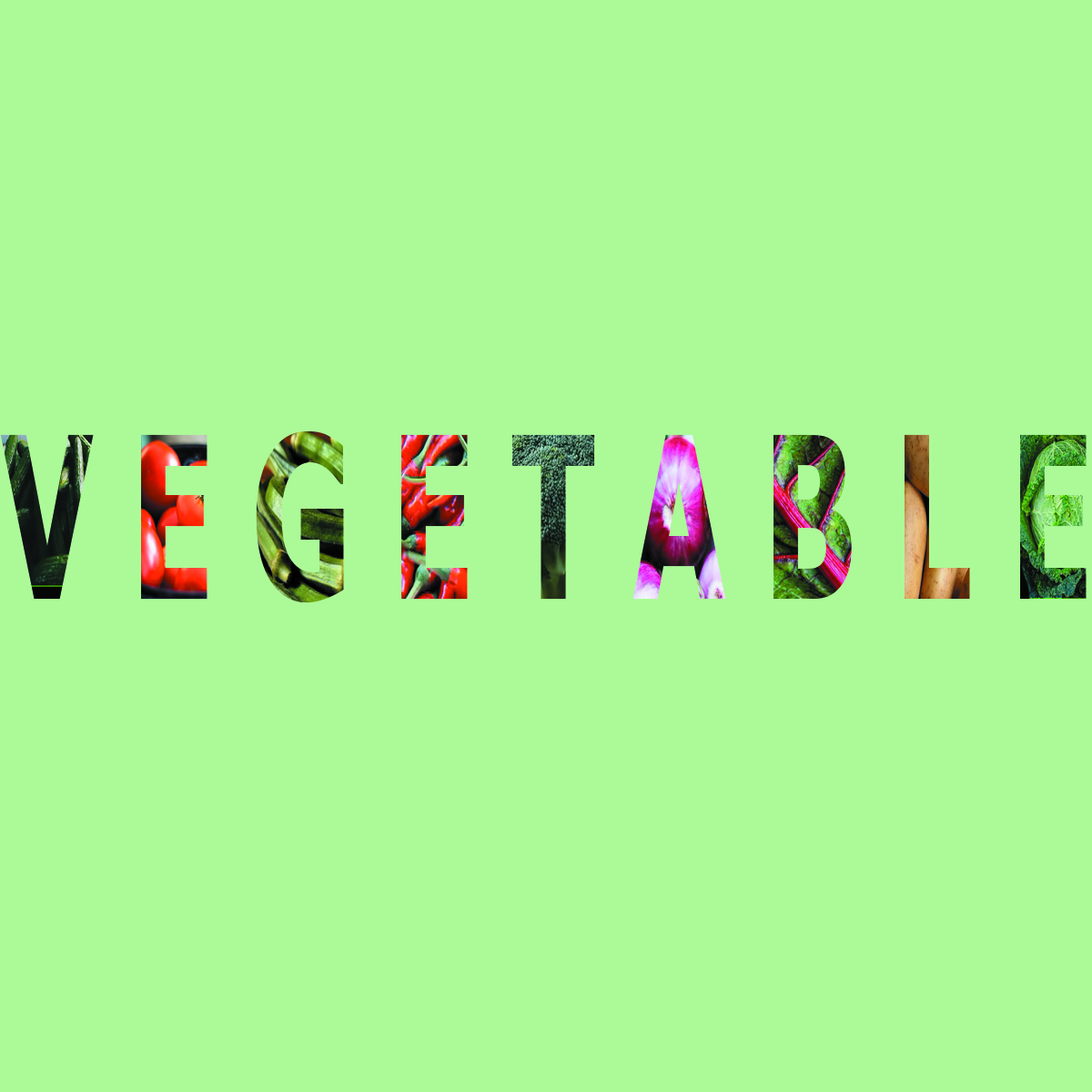
<style>
.page{position:relative;width:1092px;height:1092px;background:#acf998}
.page>*{position:absolute;margin:0}
.t1{font:224.9px "Tahoma-Bold";scale:0.59 1}
</style>
<div class="page">
<p class="t1" style="left:0px;top:430px;width:1087px;height:172px">V E G E T A B L E</p>
</div>
